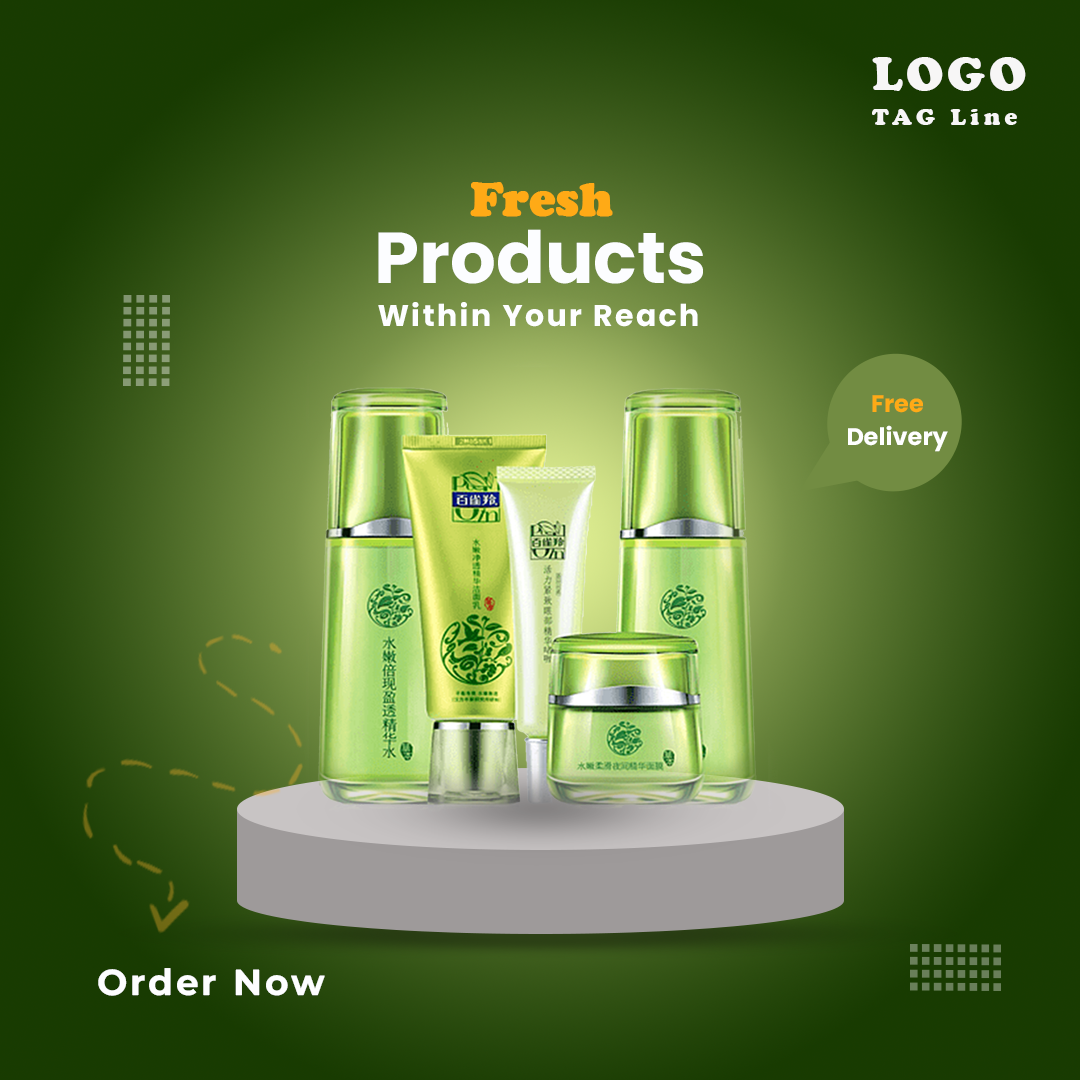
<style>
.page{position:relative;width:1080px;height:1080px}
.page>*{position:absolute;margin:0}
.t1{font:48px "CooperBlack";letter-spacing:0.08em;color:#f7f6f6}
.t2{font:24px "CooperBlack";letter-spacing:0.2em;color:#f7f6f6}
.t3{font:48px "CooperBlack";color:#ffaa16;font-weight:bold}
.t4{font:72px "Poppins-Bold";color:#fcfdff}
.t5{font:30px "Poppins-Bold";letter-spacing:0.08em;color:#fdfeff}
.t6{font:24px "Poppins-Bold";color:#ffaa16}
.t7{font:24px "Poppins-Bold";color:#ffffff}
.t8{font:36px "Montserrat-Bold";letter-spacing:0.08em;color:#fdfeff}
</style>
<div class="page">
<p class="t1" style="left:872px;top:57px;width:154px;height:34px">LOGO</p>
<p class="t2" style="left:872px;top:109px;width:145px;height:16px">TAG Line</p>
<p class="t3" style="left:470px;top:182px;width:143px;height:35px">Fresh</p>
<p class="t4" style="left:378px;top:229px;width:325px;height:55px">Products</p>
<p class="t5" style="left:378px;top:302px;width:320px;height:25px">Within Your Reach</p>
<p class="t6" style="left:872px;top:395px;width:51px;height:18px">Free</p>
<p class="t7" style="left:848px;top:425px;width:100px;height:27px">Delivery</p>
<p class="t8" style="left:98px;top:968px;width:227px;height:28px">Order Now</p>
</div>
